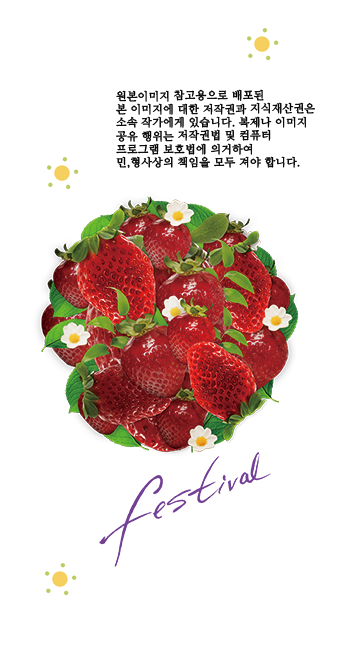
<style>
.page{position:relative;width:344px;height:651px;background:#ffffff}
.page>*{position:absolute;margin:0}
.t1{font:11.1px "NanumMyeongjo";color:#000000;font-weight:bold}
</style>
<div class="page">
<p class="t1" style="left:116px;top:89px;width:199px;height:79px">원본이미지 참고용으로 배포된<br>본 이미지에 대한 저작권과 지식재산권은<br>소속 작가에게 있습니다. 복제나 이미지<br>공유 행위는 저작권법 및 컴퓨터<br>프로그램 보호법에 의거하여 <br>민,형사상의 책임을 모두 져야 합니다.</p>
</div>
